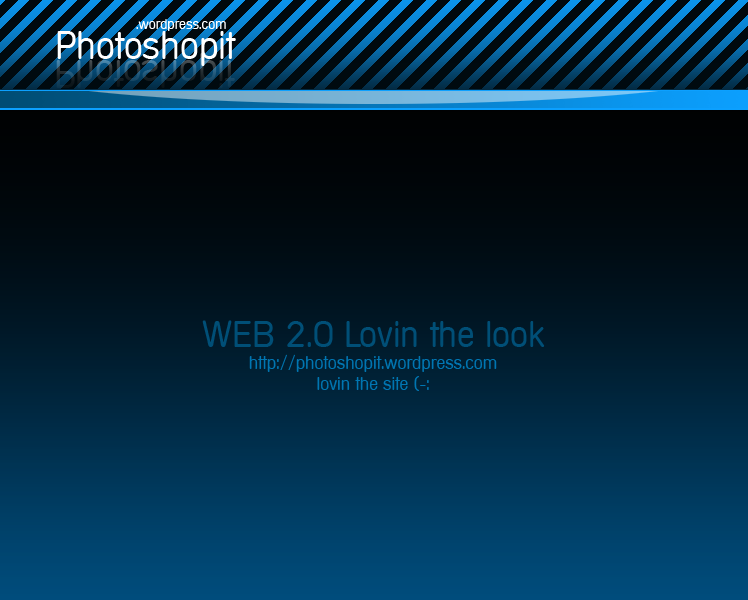
<style>
.page{position:relative;width:748px;height:600px}
.page>*{position:absolute;margin:0}
.t1{font:14px "ft";color:#ffffff}
.t2{font:37.7px "ft";color:#ffffff}
.t3{font:18px "ft";color:#0076b2}
.t4{font:36px "ft";color:#004f77}
</style>
<div class="page">
<p class="t1" style="left:136px;top:19px;width:90px;height:12px">.wordpress.com</p>
<p class="t2" style="left:57px;top:31px;width:179px;height:35px">Photoshopit</p>
<p class="t3" style="left:202px;top:320px;width:343px;height:71px;text-align:center"><span class="t4">WEB 2.0 Lovin the look<br></span>http://photoshopit.wordpress.com<br>lovin the site (-:</p>
</div>
